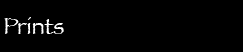
<style>
.page{position:relative;width:243px;height:52px;background:#000000}
.page>*{position:absolute;margin:0}
.t1{font:24px "Papyrus";letter-spacing:-0.005em;color:#ffffff}
</style>
<div class="page">
<p class="t1" style="left:4px;top:17px;width:60px;height:17px">Prints</p>
</div>
